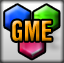
<style>
.page{position:relative;width:64px;height:63px}
.page>*{position:absolute;margin:0}
.t1{font:30px "NimbusSanT-BoldCond";letter-spacing:-0.002em}
</style>
<div class="page">
<p class="t1" style="left:12px;top:20px;width:40px;height:21px">GME</p>
</div>
